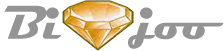
<style>
.page{position:relative;width:224px;height:51px;background:#ffffff}
.page>*{position:absolute;margin:0}
.t1{font:48px "Magneto-Bold";letter-spacing:0.003em;color:#949494}
</style>
<div class="page">
<p class="t1" style="left:4px;top:5px;width:220px;height:44px">Bi    joo</p>
</div>
